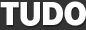
<style>
.page{position:relative;width:86px;height:30px;background:#fffeff}
.page>*{position:absolute;margin:0}
.t1{font:29.3px "RodinPro-UB";letter-spacing:-0.053em;color:#fffeff}
</style>
<div class="page">
<p class="t1" style="left:0px;top:1px;width:86px;height:25px">TUDO</p>
</div>
